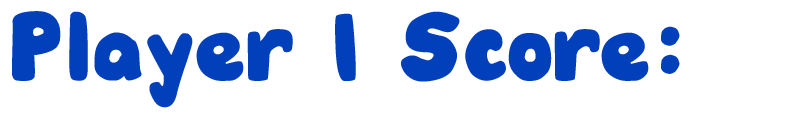
<style>
.page{position:relative;width:788px;height:120px;background:#ffffff}
.page>*{position:absolute;margin:0}
.t1{font:72px "DJBHUNKYCHUNK-Bold";color:#023fba}
</style>
<div class="page">
<p class="t1" style="left:12px;top:11px;width:668px;height:97px">Player 1 Score:</p>
</div>
